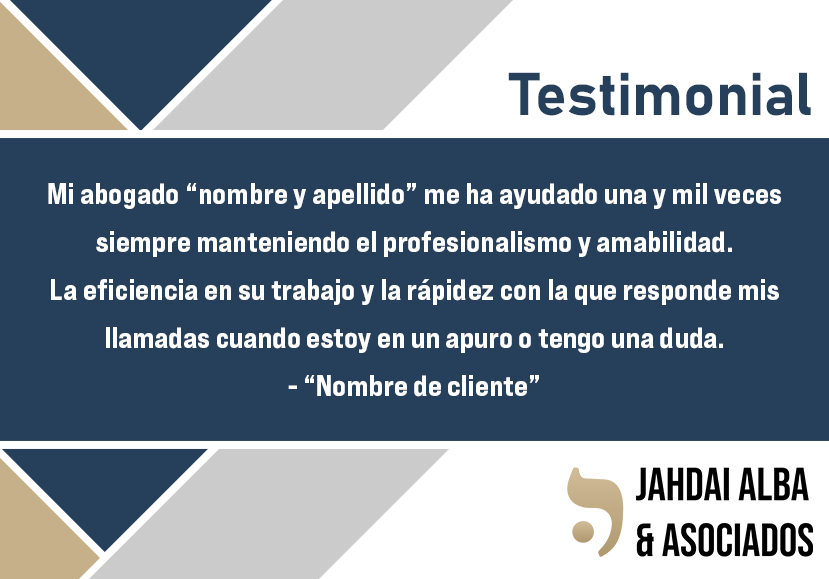
<style>
.page{position:relative;width:829px;height:579px;background:#26405c}
.page>*{position:absolute;margin:0}
.t1{font:59.5px "Bahnschrift-Bold";color:#26405c}
.t2{font:29.6px/48px "BebasNeuePro-ExpEb";color:#ffffff}
</style>
<div class="page">
<p class="t1" style="left:508px;top:72px;width:303px;height:44px">Testimonial</p>
<p class="t2" style="left:48px;top:183px;width:733px;height:214px;text-align:center">Mi abogado “nombre y apellido” me ha ayudado una y mil veces<br>siempre manteniendo el profesionalismo y amabilidad.<br>La eficiencia en su trabajo y la rápidez con la que responde mis<br>llamadas cuando estoy en un apuro o tengo una duda.<br>- “Nombre de cliente”</p>
</div>
